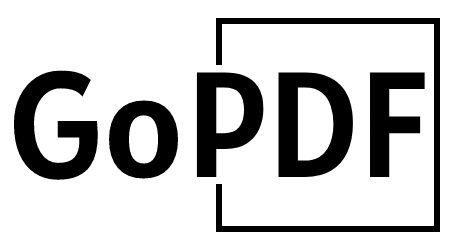
<style>
.page{position:relative;width:450px;height:250px;background:#ffffff}
.page>*{position:absolute;margin:0}
.t1{font:150px "Alatsi-Regular";color:#000000}
</style>
<div class="page">
<p class="t1" style="left:13px;top:70px;width:412px;height:110px">GoPDF</p>
</div>
